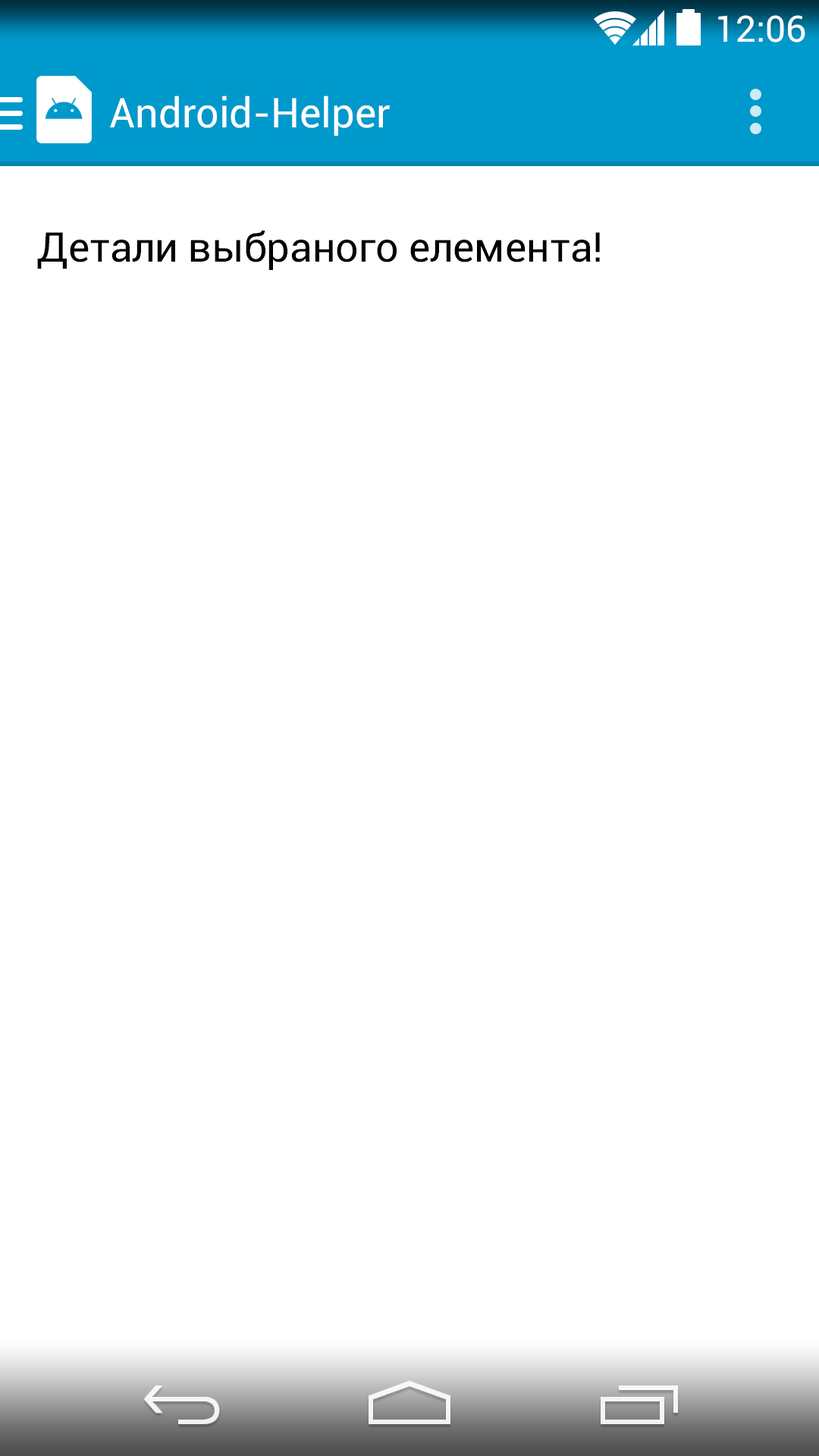
<style>
.page{position:relative;width:819px;height:1456px;background:#ffffff}
.page>*{position:absolute;margin:0}
.t1{font:36.4px "Roboto-Regular";color:#ffffff}
.t2{font:40.9px "Roboto-Regular";color:#ffffff}
.t3{font:40.9px "Roboto-Regular";color:#000000}
</style>
<div class="page">
<p class="t1" style="left:718px;top:15px;width:87px;height:27px">12:06</p>
<p class="t2" style="left:110px;top:96px;width:280px;height:40px">Android-Helper</p>
<p class="t3" style="left:37px;top:231px;width:563px;height:39px">Детали выбраного елемента!</p>
</div>
